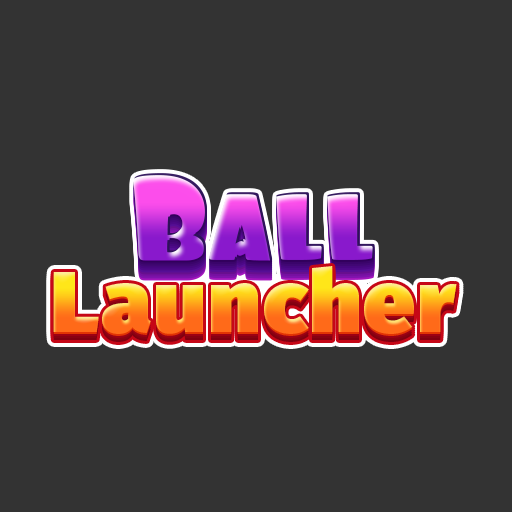
<style>
.page{position:relative;width:512px;height:512px;background:#333333}
.page>*{position:absolute;margin:0}
.t1{font:122.7px "Foo-Regular";letter-spacing:-0.02em;scale:1.05 1}
.t2{font:87.1px "FiraSans-Ultra";letter-spacing:0.025em;scale:1.05 1}
</style>
<div class="page">
<p class="t1" style="left:133px;top:173px;width:242px;height:88px">Ball</p>
<p class="t2" style="left:53px;top:266px;width:404px;height:68px">Launcher</p>
</div>
